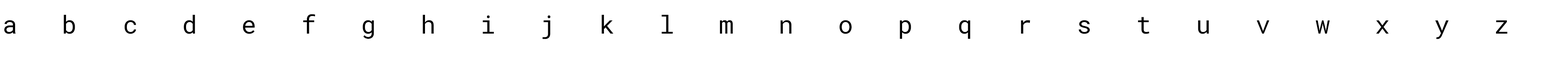
<style>
.page{position:relative;width:1568px;height:60px;background:#ffffff}
.page>*{position:absolute;margin:0}
.t1{font:24.8px "RobotoMono-Regular";color:#000000}
</style>
<div class="page">
<p class="t1" style="left:64px;top:15px;width:11px;height:19px">b</p>
<p class="t1" style="left:184px;top:15px;width:11px;height:19px">d</p>
<p class="t1" style="left:303px;top:14px;width:12px;height:19px">f</p>
<p class="t1" style="left:423px;top:15px;width:11px;height:18px">h</p>
<p class="t1" style="left:483px;top:15px;width:11px;height:18px">i</p>
<p class="t1" style="left:542px;top:15px;width:9px;height:24px">j</p>
<p class="t1" style="left:602px;top:15px;width:11px;height:18px">k</p>
<p class="t1" style="left:662px;top:15px;width:11px;height:18px">l</p>
<p class="t1" style="left:1138px;top:17px;width:11px;height:17px">t</p>
<p class="t1" style="left:4px;top:20px;width:12px;height:14px">a</p>
<p class="t1" style="left:124px;top:20px;width:12px;height:14px">c</p>
<p class="t1" style="left:243px;top:20px;width:12px;height:14px">e</p>
<p class="t1" style="left:363px;top:20px;width:11px;height:19px">g</p>
<p class="t1" style="left:720px;top:20px;width:13px;height:13px">m</p>
<p class="t1" style="left:780px;top:20px;width:12px;height:13px">n</p>
<p class="t1" style="left:839px;top:20px;width:13px;height:14px">o</p>
<p class="t1" style="left:900px;top:20px;width:11px;height:19px">p</p>
<p class="t1" style="left:959px;top:20px;width:11px;height:19px">q</p>
<p class="t1" style="left:1021px;top:20px;width:9px;height:13px">r</p>
<p class="t1" style="left:1079px;top:20px;width:11px;height:14px">s</p>
<p class="t1" style="left:1198px;top:20px;width:11px;height:14px">u</p>
<p class="t1" style="left:1257px;top:20px;width:12px;height:13px">v</p>
<p class="t1" style="left:1316px;top:20px;width:14px;height:13px">w</p>
<p class="t1" style="left:1376px;top:20px;width:13px;height:13px">x</p>
<p class="t1" style="left:1435px;top:20px;width:14px;height:19px">y</p>
<p class="t1" style="left:1496px;top:20px;width:12px;height:13px">z</p>
</div>
